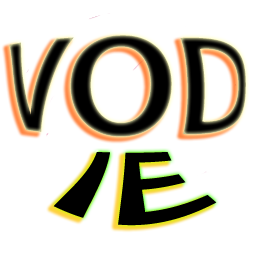
<style>
.page{position:relative;width:256px;height:256px;background:#ffffff}
.page>*{position:absolute;margin:0}
.t1{font:120px "MyriadPro-Semibold"}
.t2{font:100px "MyriadPro-Semibold";color:#000000}
</style>
<div class="page">
<p class="t1" style="left:9px;top:35px;width:237px;height:102px">VOD</p>
<p class="t2" style="left:53px;top:152px;width:164px;height:74px">IE</p>
</div>
